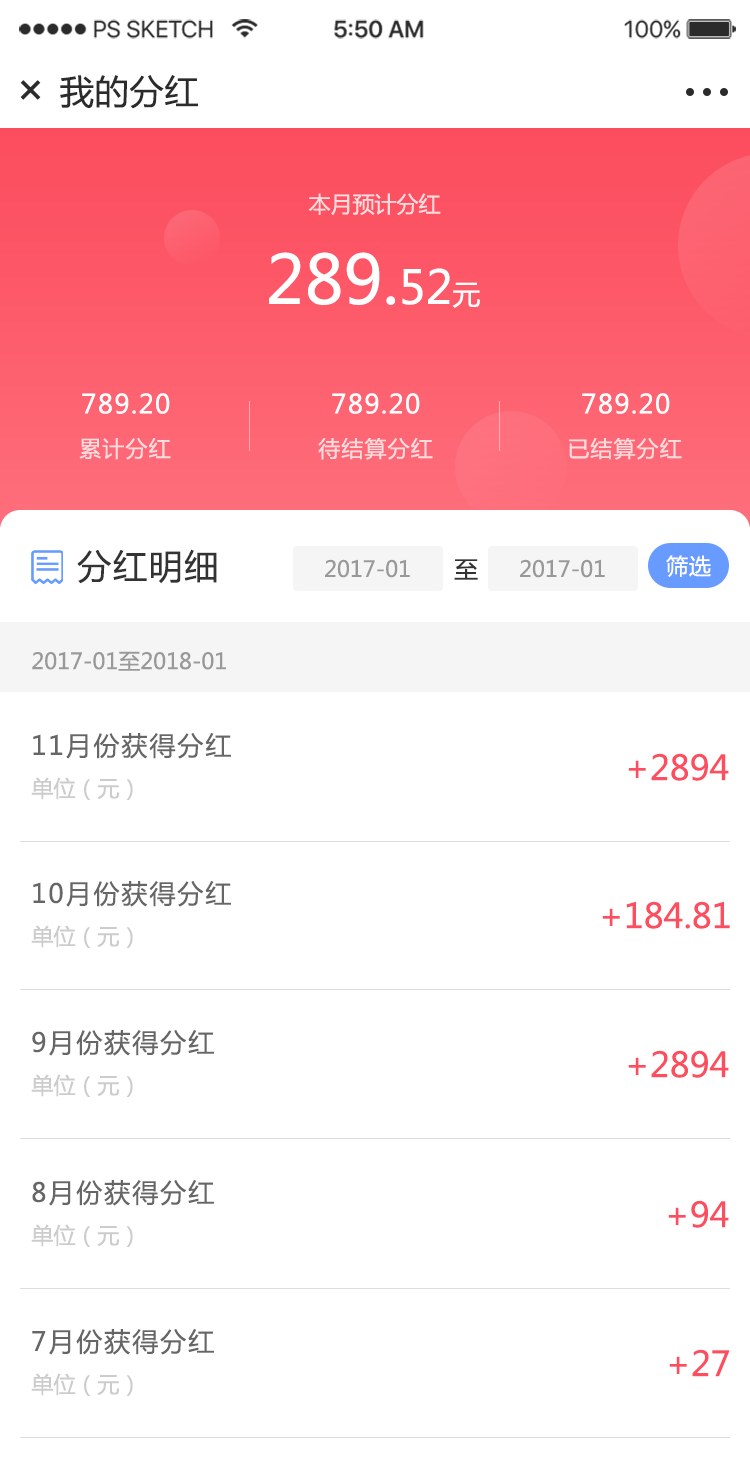
<style>
.page{position:relative;width:750px;height:1457px;background:#ffffff}
.page>*{position:absolute;margin:0}
.t1{font:34px "MicrosoftYaHei";letter-spacing:0.025em;color:#2b2b2b;text-transform:uppercase}
.t2{font:47.9px "MicrosoftYaHei";letter-spacing:0.025em;color:#2b2b2b;text-transform:uppercase}
.t3{font:22px "MicrosoftYaHei";color:#ffdcde}
.t4{font:66.7px "MicrosoftYaHei";color:#ffffff}
.t5{font:46px "MicrosoftYaHei";color:#ffffff}
.t6{font:27.7px "MicrosoftYaHei";color:#ffffff}
.t7{font:26px "MicrosoftYaHei";letter-spacing:0.05em;color:#ffffff}
.t8{font:22px "MicrosoftYaHei";letter-spacing:0.05em;color:#ffdcde}
.t9{font:34px "MicrosoftYaHei";letter-spacing:0.05em;color:#333333}
.t10{font:22px "MicrosoftYaHei";letter-spacing:0.04em;color:#ffffff}
.t11{font:22px "MicrosoftYaHei";color:#999999}
.t12{font:24px "MicrosoftYaHei";letter-spacing:0.04em;color:#333333}
.t13{font:26px "MicrosoftYaHei";letter-spacing:0.075em;color:#666666}
.t14{font:34px "MicrosoftYaHei";color:#fc4e5f}
.t15{font:22px "MicrosoftYaHei";color:#cccccc}
</style>
<div class="page">
<p class="t1" style="left:60px;top:75px;width:138px;height:34px">我的分红</p>
<p class="t2" style="left:20px;top:80px;width:21px;height:20px;rotate:45deg">+</p>
<p class="t3" style="left:308px;top:193px;width:133px;height:22px">本月预计分红</p>
<p class="t4" style="left:269px;top:252px;width:211px;height:56px">289.<span class="t5">52</span><span class="t6">元</span></p>
<p class="t7" style="left:82px;top:393px;width:88px;height:21px">789.20</p>
<p class="t7" style="left:332px;top:393px;width:88px;height:21px">789.20</p>
<p class="t7" style="left:582px;top:393px;width:88px;height:21px">789.20</p>
<p class="t8" style="left:79px;top:437px;width:92px;height:23px">累计分红</p>
<p class="t8" style="left:318px;top:437px;width:115px;height:23px">待结算分红</p>
<p class="t8" style="left:569px;top:437px;width:113px;height:23px">已结算分红</p>
<p class="t9" style="left:77px;top:549px;width:140px;height:35px">分红明细</p>
<p class="t10" style="left:666px;top:555px;width:45px;height:22px">筛选</p>
<p class="t11" style="left:325px;top:559px;width:85px;height:19px">2017-01</p>
<p class="t12" style="left:454px;top:559px;width:24px;height:21px">至</p>
<p class="t11" style="left:520px;top:559px;width:85px;height:19px">2017-01</p>
<p class="t11" style="left:32px;top:651px;width:194px;height:20px">2017-01至2018-01</p>
<p class="t13" style="left:33px;top:733px;width:198px;height:26px">11月份获得分红</p>
<p class="t14" style="left:628px;top:753px;width:101px;height:28px">+2894</p>
<p class="t15" style="left:31px;top:777px;width:102px;height:23px">单位（元）</p>
<p class="t13" style="left:33px;top:881px;width:198px;height:26px">10月份获得分红</p>
<p class="t14" style="left:602px;top:901px;width:128px;height:28px">+184.81</p>
<p class="t15" style="left:31px;top:925px;width:102px;height:23px">单位（元）</p>
<p class="t13" style="left:32px;top:1030px;width:182px;height:26px">9月份获得分红</p>
<p class="t14" style="left:628px;top:1050px;width:101px;height:28px">+2894</p>
<p class="t15" style="left:31px;top:1074px;width:102px;height:23px">单位（元）</p>
<p class="t13" style="left:32px;top:1180px;width:182px;height:26px">8月份获得分红</p>
<p class="t14" style="left:668px;top:1200px;width:61px;height:28px">+94</p>
<p class="t15" style="left:31px;top:1224px;width:102px;height:23px">单位（元）</p>
<p class="t13" style="left:32px;top:1329px;width:182px;height:26px">7月份获得分红</p>
<p class="t14" style="left:669px;top:1349px;width:61px;height:28px">+27</p>
<p class="t15" style="left:31px;top:1373px;width:102px;height:23px">单位（元）</p>
</div>
